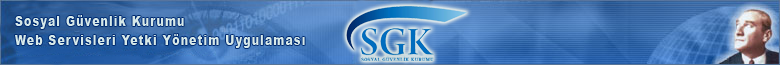
<style>
.page{position:relative;width:780px;height:65px}
.page>*{position:absolute;margin:0}
.t1{font:14.3px/19px "Arial-Black";letter-spacing:0.1em;color:#d7e9e9;scale:0.77 1}
.t2{font:14.3px/19px "Arial-Black";letter-spacing:0.1em;color:#d7e9e9;text-transform:uppercase;scale:0.77 1}
</style>
<div class="page">
<p class="t1" style="left:15px;top:15px;width:290px;height:33px"><span class="t2">S</span>osyal Güvenlik Kurumu<br>Web Servisleri Yetki Yönetim Uygulaması</p>
</div>
